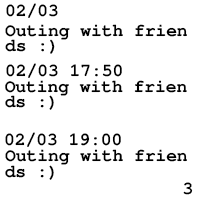
<style>
.page{position:relative;width:200px;height:200px;background:#ffffff}
.page>*{position:absolute;margin:0}
.t1{font:17.9px "FreeMonoBold";color:#000000}
</style>
<div class="page">
<p class="t1" style="left:6px;top:3px;width:52px;height:15px">02/03</p>
<p class="t1" style="left:5px;top:24px;width:182px;height:16px">Outing with frien</p>
<p class="t1" style="left:5px;top:39px;width:50px;height:15px">ds :)</p>
<p class="t1" style="left:6px;top:63px;width:116px;height:15px">02/03 17:50</p>
<p class="t1" style="left:5px;top:80px;width:182px;height:16px">Outing with frien</p>
<p class="t1" style="left:5px;top:95px;width:49px;height:15px">ds :)</p>
<p class="t1" style="left:5px;top:132px;width:116px;height:15px">02/03 19:00</p>
<p class="t1" style="left:5px;top:149px;width:182px;height:16px">Outing with frien</p>
<p class="t1" style="left:5px;top:165px;width:49px;height:15px">ds :)</p>
<p class="t1" style="left:183px;top:182px;width:10px;height:13px">3</p>
</div>
